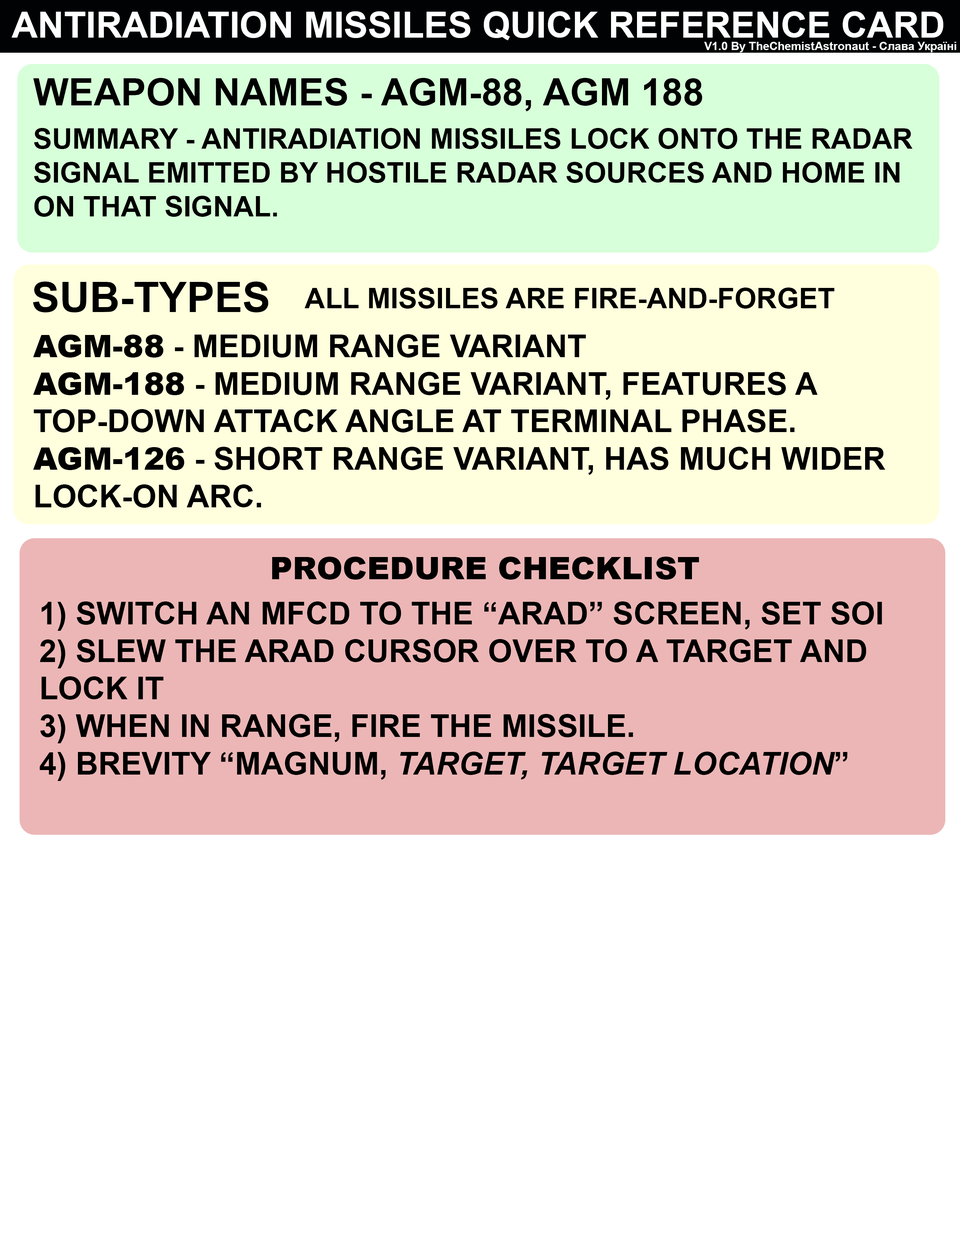
<style>
.page{position:relative;width:960px;height:1242px;background:#ffffff}
.page>*{position:absolute;margin:0}
.t1{font:36.1px "Arial-BoldMT";color:#ffffff}
.t2{font:11.5px "Arial-BoldMT";color:#ffffff}
.t3{font:37.6px "Arial-BoldMT";color:#000000}
.t4{font:28.2px "Arial-BoldMT";color:#000000}
.t5{font:41.7px "Arial-BoldMT";color:#000000}
.t6{font:31.3px "Arial-BoldMT";color:#000000}
.t7{font:31.3px "Arial-Black";color:#000000}
.t8{font:31.4px "Arial-Black";color:#000000}
.t9{font:31.3px "Arial-BoldItalicMT";color:#000000}
</style>
<div class="page">
<p class="t1" style="left:11px;top:11px;width:932px;height:29px">ANTIRADIATION MISSILES QUICK REFERENCE CARD</p>
<p class="t2" style="left:704px;top:42px;width:252px;height:10px">V1.0 By TheChemistAstronaut - Слава Україні</p>
<p class="t3" style="left:33px;top:78px;width:669px;height:33px">WEAPON NAMES - AGM-88, AGM 188</p>
<p class="t4" style="left:34px;top:128px;width:878px;height:89px">SUMMARY - ANTIRADIATION MISSILES LOCK ONTO THE RADAR SIGNAL EMITTED BY HOSTILE RADAR SOURCES AND HOME IN ON THAT SIGNAL.</p>
<p class="t5" style="left:33px;top:282px;width:235px;height:30px">SUB-TYPES</p>
<p class="t4" style="left:305px;top:288px;width:530px;height:21px">ALL MISSILES ARE FIRE-AND-FORGET</p>
<p class="t6" style="left:33px;top:334px;width:852px;height:174px"><span class="t7">AGM-88</span> - MEDIUM RANGE VARIANT<br><span class="t7">AGM-188</span> - MEDIUM RANGE VARIANT, FEATURES A TOP-DOWN ATTACK ANGLE AT TERMINAL PHASE.<br><span class="t7">AGM-126</span> - SHORT RANGE VARIANT, HAS MUCH WIDER LOCK-ON ARC.</p>
<p class="t8" style="left:272px;top:557px;width:427px;height:23px">PROCEDURE CHECKLIST</p>
<p class="t6" style="left:40px;top:602px;width:842px;height:179px">1) SWITCH AN MFCD TO THE “ARAD” SCREEN, SET SOI<br>2) SLEW THE ARAD CURSOR OVER TO A TARGET AND LOCK IT<br>3) WHEN IN RANGE, FIRE THE MISSILE. <br>4) BREVITY “MAGNUM, <span class="t9">TARGET, TARGET LOCATION</span>”</p>
</div>
